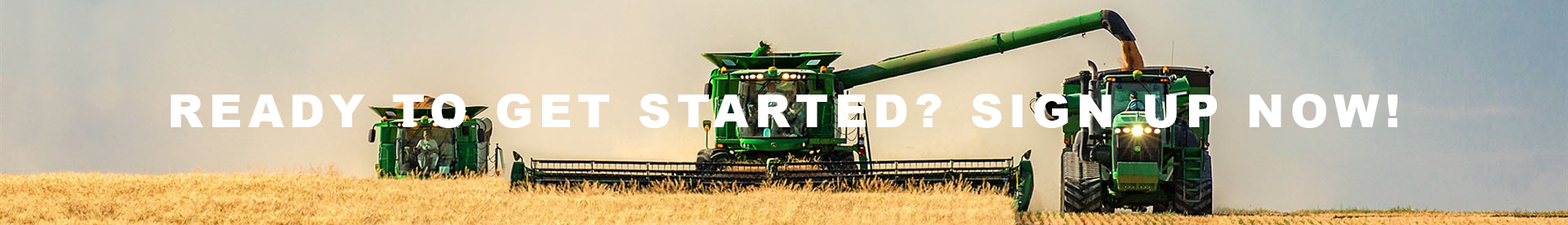
<style>
.page{position:relative;width:1568px;height:225px}
.page>*{position:absolute;margin:0}
.t1{font:45.7px "Arial-Black";letter-spacing:0.13em;color:#ffffff}
</style>
<div class="page">
<p class="t1" style="left:171px;top:94px;width:1227px;height:34px">READY TO GET STARTED? SIGN UP NOW!</p>
</div>
